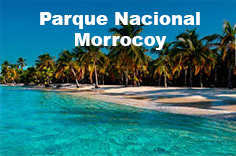
<style>
.page{position:relative;width:236px;height:156px}
.page>*{position:absolute;margin:0}
.t1{font:18px "Arial-Black";color:#ffffff}
</style>
<div class="page">
<p class="t1" style="left:40px;top:12px;width:160px;height:38px;text-align:center">Parque Nacional Morrocoy</p>
</div>
